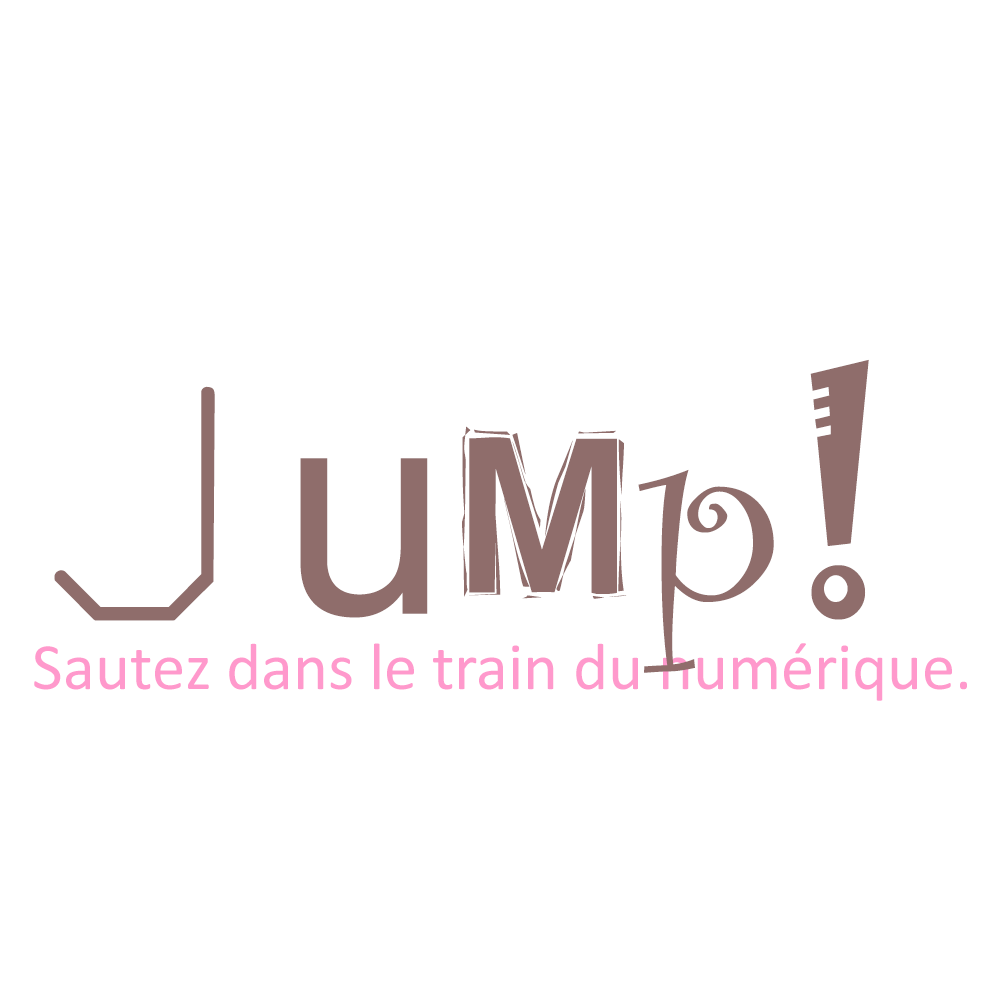
<style>
.page{position:relative;width:1000px;height:1000px;background:#ffffff}
.page>*{position:absolute;margin:0}
.t1{font:300px "SWMono";color:#8f6d6b}
.t2{font:300px "ArialNova";color:#8f6d6b}
.t3{font:300px "ARDARLING";color:#8f6d6b}
.t4{font:300px "CurlzMT";color:#8f6d6b}
.t5{font:300px "Jokerman-Regular";color:#8f6d6b}
.t6{font:66.7px "Calibri";color:#ff99cc}
</style>
<div class="page">
<p class="t1" style="left:54px;top:359px;width:815px;height:314px">J<span class="t2">u</span><span class="t3">m</span><span class="t4">p</span><span class="t5">!</span></p>
<p class="t6" style="left:34px;top:643px;width:933px;height:58px">Sautez dans le train du numérique.</p>
</div>
